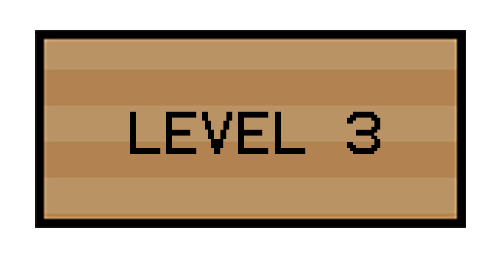
<style>
.page{position:relative;width:500px;height:258px;background:#ffffff}
.page>*{position:absolute;margin:0}
.t1{font:48.4px "Terminal";color:#000000}
</style>
<div class="page">
<p class="t1" style="left:130px;top:111px;width:251px;height:43px">LEVEL 3</p>
</div>
